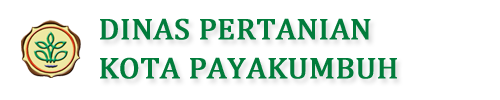
<style>
.page{position:relative;width:500px;height:100px;background:#ffffff}
.page>*{position:absolute;margin:0}
.t1{font:30px "Cambria";color:#017c3b;font-weight:bold;scale:1.05 1}
</style>
<div class="page">
<p class="t1" style="left:100px;top:18px;width:271px;height:22px">DINAS PERTANIAN</p>
<p class="t1" style="left:100px;top:57px;width:297px;height:22px">KOTA PAYAKUMBUH</p>
</div>
